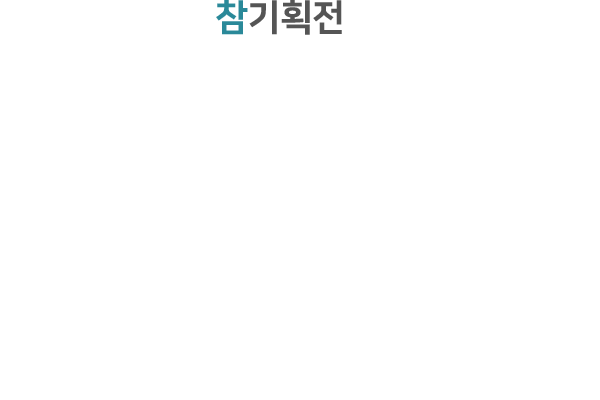
<style>
.page{position:relative;width:600px;height:400px;background:#ffffff}
.page>*{position:absolute;margin:0}
.t1{font:36.6px "NanumSquareEB";letter-spacing:-0.02em;color:#555555}
.t2{font:36.6px "NanumSquareEB";letter-spacing:-0.02em;color:#2a8999}
</style>
<div class="page">
<p class="t1" style="left:216px;top:0px;width:126px;height:35px"><span class="t2">참</span>기획전</p>
</div>
